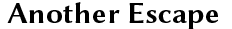
<style>
.page{position:relative;width:232px;height:29px;background:#ffffff}
.page>*{position:absolute;margin:0}
.t1{font:30px "LinBiolinumOB";color:#000000}
</style>
<div class="page">
<p class="t1" style="left:7px;top:2px;width:211px;height:28px">Another Escape</p>
</div>
